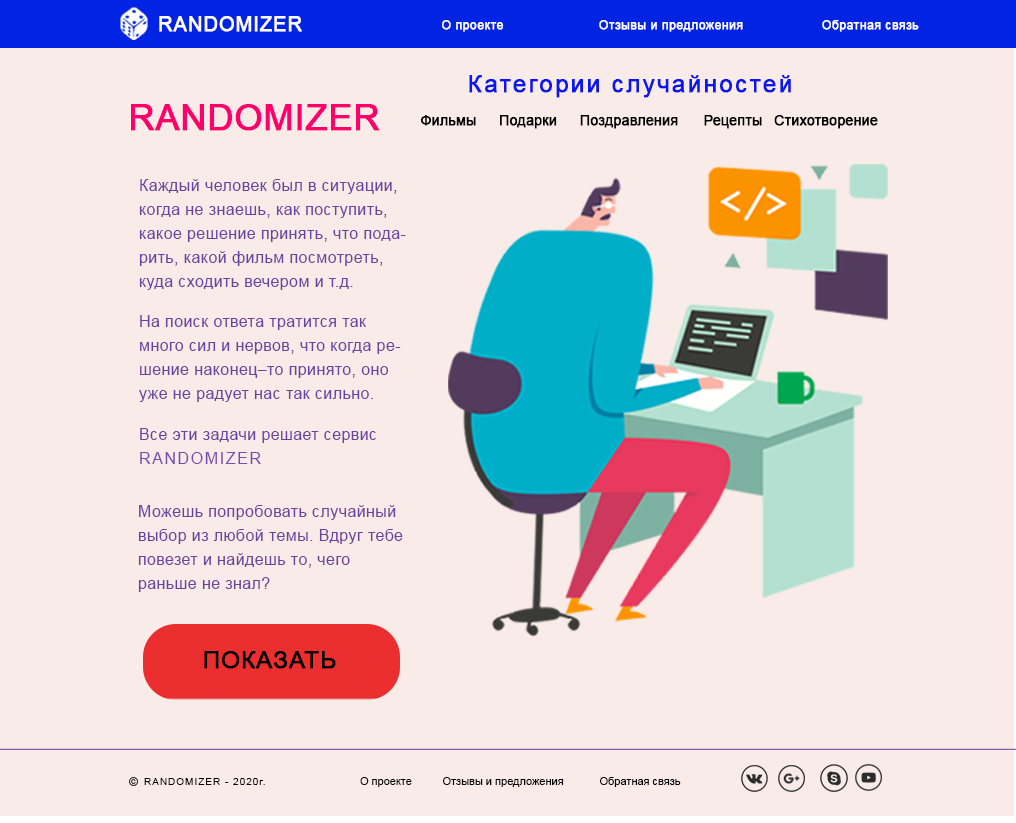
<style>
.page{position:relative;width:1016px;height:823px;background:#f9ebe8}
.page>*{position:absolute;margin:0}
.t1{font:20px "ArialMT";letter-spacing:0.025em;color:#ffffff;font-weight:bold}
.t2{font:12px "ArialMT";letter-spacing:0.025em;color:#ffffff;font-weight:bold}
.t3{font:24px "ArialMT";letter-spacing:0.075em;color:#0a18ee;font-weight:bold}
.t4{font:36px "ArialMT";color:#ff006b;font-weight:bold}
.t5{font:14px "ArialMT";color:#000000;font-weight:bold}
.t6{font:16px/24px "ArialMT";letter-spacing:0.025em;color:#6a42a1}
.t7{font:16px/24px "ArialMT";letter-spacing:0.1em;color:#784bb2}
.t8{font:24px "ArialMT";letter-spacing:0.025em;color:#000000;font-weight:bold}
.t9{font:18px "ArialMT";letter-spacing:0.025em;color:#000000}
.t10{font:10px "ArialMT";letter-spacing:0.1em;color:#000000}
.t11{font:11px "ArialMT";color:#000000}
</style>
<div class="page">
<p class="t1" style="left:159px;top:16px;width:143px;height:16px">RANDOMIZER</p>
<p class="t2" style="left:442px;top:20px;width:62px;height:12px">О проекте</p>
<p class="t2" style="left:599px;top:20px;width:144px;height:12px">Отзывы и предложения</p>
<p class="t2" style="left:822px;top:20px;width:97px;height:12px">Обратная связь</p>
<p class="t3" style="left:469px;top:75px;width:322px;height:23px">Категории случайностей</p>
<p class="t4" style="left:131px;top:104px;width:249px;height:27px">RANDOMIZER</p>
<p class="t5" style="left:421px;top:115px;width:55px;height:11px">Фильмы</p>
<p class="t5" style="left:500px;top:115px;width:57px;height:14px">Подарки</p>
<p class="t5" style="left:580px;top:115px;width:98px;height:14px">Поздравления</p>
<p class="t5" style="left:704px;top:115px;width:58px;height:14px">Рецепты</p>
<p class="t5" style="left:774px;top:115px;width:104px;height:14px">Стихотворение</p>
<p class="t6" style="left:139px;top:179px;width:267px;height:111px">Каждый человек был в ситуации, когда не знаешь, как поступить, какое решение принять, что подарить, какой фильм посмотреть, куда сходить вечером и т.д.</p>
<p class="t6" style="left:139px;top:315px;width:262px;height:87px">На поиск ответа тратится так много сил и нервов, что когда решение наконец–то принято, оно уже не радует нас так сильно.</p>
<p class="t6" style="left:140px;top:428px;width:236px;height:36px">Все эти задачи решает сервис <span class="t7">RANDOMIZER</span></p>
<p class="t6" style="left:138px;top:505px;width:265px;height:87px">Можешь попробовать случайный выбор из любой темы. Вдруг тебе повезет и найдешь то, чего раньше не знал?</p>
<p class="t8" style="left:204px;top:651px;width:132px;height:18px"><span class="t9"><br></span>ПОКАЗАТЬ</p>
<p class="t10" style="left:144px;top:778px;width:121px;height:7px">RANDOMIZER - 2020г.</p>
<p class="t11" style="left:360px;top:777px;width:52px;height:10px">О проекте</p>
<p class="t11" style="left:443px;top:777px;width:121px;height:10px">Отзывы и предложения</p>
<p class="t11" style="left:600px;top:777px;width:81px;height:10px">Обратная связь</p>
</div>
